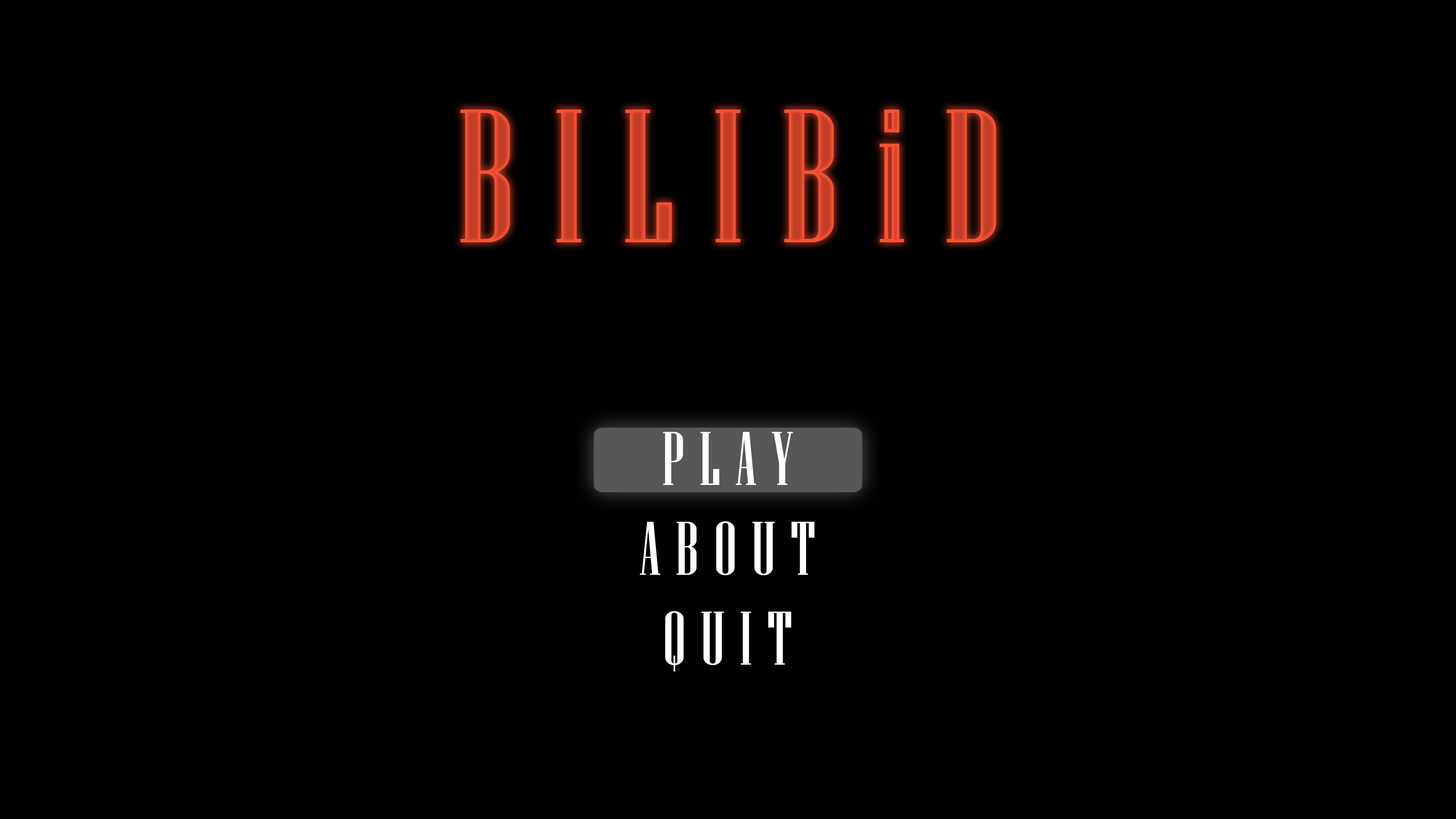
<style>
.page{position:relative;width:1456px;height:819px;background:#000000}
.page>*{position:absolute;margin:0}
.t1{font:189.6px "NiagaraSolid-Reg";letter-spacing:0.2em}
.t2{font:189.6px "NiagaraEngraved-Reg";letter-spacing:0.2em}
.t3{font:75.8px "NiagaraSolid-Reg";letter-spacing:0.2em;color:#ffffff}
</style>
<div class="page">
<p class="t1" style="left:460px;top:110px;width:536px;height:132px">BILIB<span class="t2">i</span>D</p>
<p class="t3" style="left:663px;top:432px;width:130px;height:53px">PLAY</p>
<p class="t3" style="left:640px;top:521px;width:174px;height:54px">ABOUT</p>
<p class="t3" style="left:665px;top:611px;width:126px;height:60px">QUIT</p>
</div>
